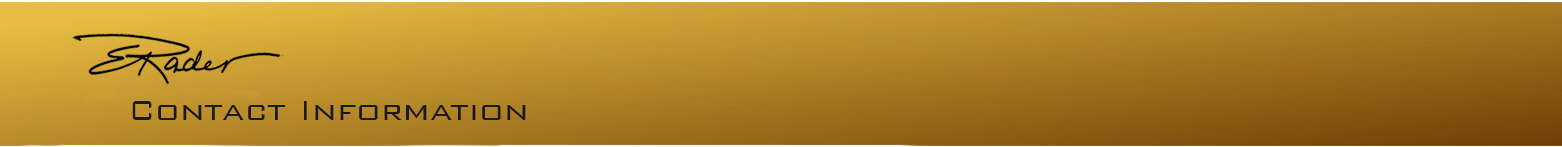
<style>
.page{position:relative;width:1562px;height:147px}
.page>*{position:absolute;margin:0}
.t1{font:36px "BankGothicBT-Light";color:#1a1a1a}
</style>
<div class="page">
<p class="t1" style="left:132px;top:101px;width:394px;height:19px">Contact Information</p>
</div>
